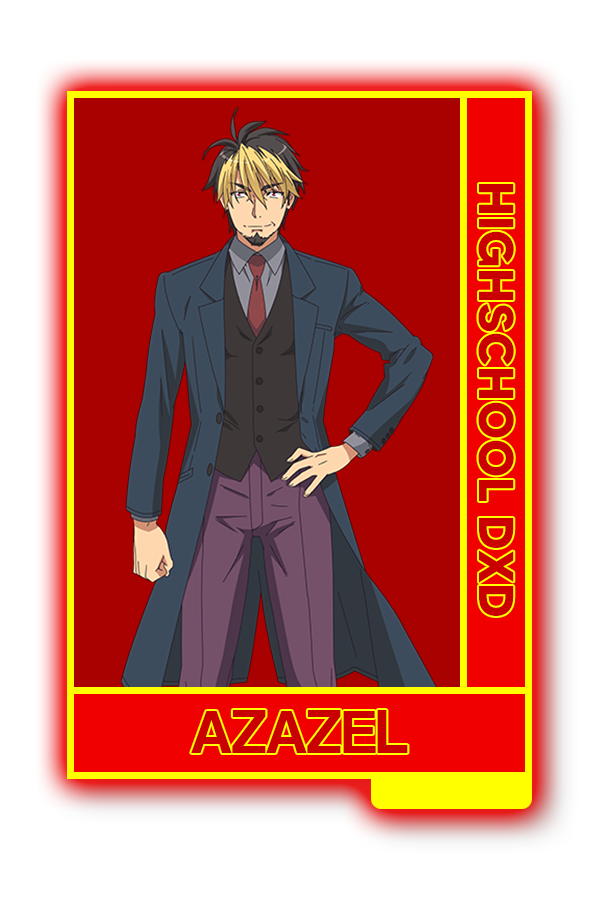
<style>
.page{position:relative;width:600px;height:900px;background:#a90000}
.page>*{position:absolute;margin:0}
.t1{font:48.8px "MADETOMMY-Bold";color:#ca0000}
.t2{font:64.2px "CoolveticaRg-Regular";color:#ca0000}
</style>
<div class="page">
<p class="t1" style="left:478px;top:184px;width:36px;height:432px;rotate:90deg">HIGHSCHOOL DXD</p>
<p class="t2" style="left:191px;top:710px;width:217px;height:43px">AZAZEL</p>
</div>
